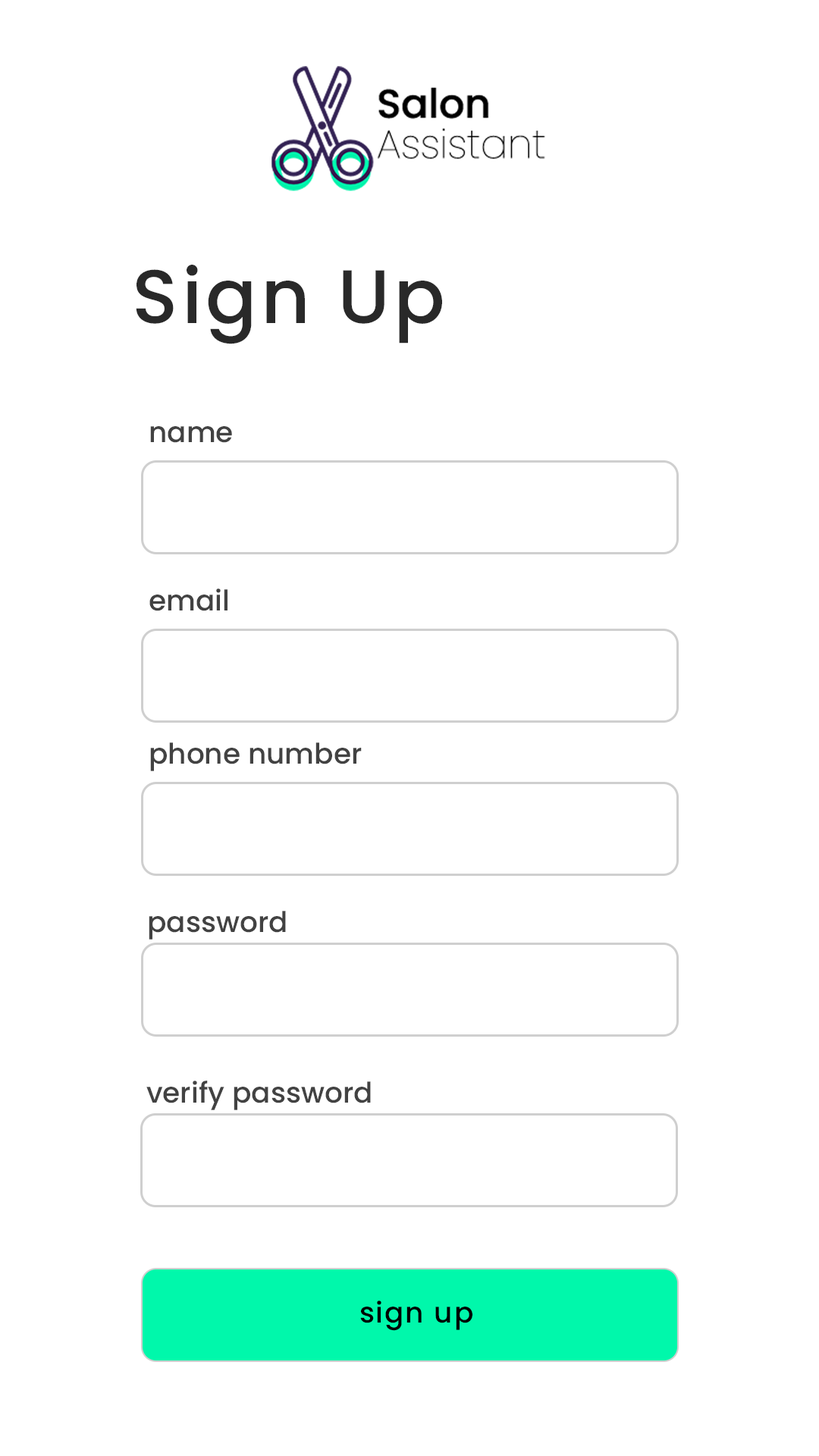
<style>
.page{position:relative;width:819px;height:1456px;background:#ffffff}
.page>*{position:absolute;margin:0}
.t1{font:75.8px "Poppins-Medium";letter-spacing:0.05em;color:#292929}
.t2{font:28.4px "Poppins-Medium";color:#424242}
.t3{font:28.4px "Poppins-Medium";letter-spacing:0.05em;color:#000000}
</style>
<div class="page">
<p class="t1" style="left:136px;top:265px;width:306px;height:79px">Sign Up</p>
<p class="t2" style="left:150px;top:426px;width:82px;height:17px">name</p>
<p class="t2" style="left:149px;top:588px;width:78px;height:23px">email</p>
<p class="t2" style="left:150px;top:742px;width:212px;height:29px">phone number</p>
<p class="t2" style="left:149px;top:911px;width:137px;height:29px">password</p>
<p class="t2" style="left:146px;top:1081px;width:225px;height:29px">verify password</p>
<p class="t3" style="left:360px;top:1301px;width:112px;height:30px">sign up</p>
</div>
